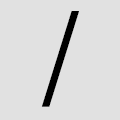
<style>
.page{position:relative;width:120px;height:120px;background:#e1e1e1}
.page>*{position:absolute;margin:0}
.t1{font:120px "Consolas";color:#000000;scale:0.74 1}
</style>
<div class="page">
<p class="t1" style="left:41px;top:11px;width:38px;height:96px">/</p>
</div>
